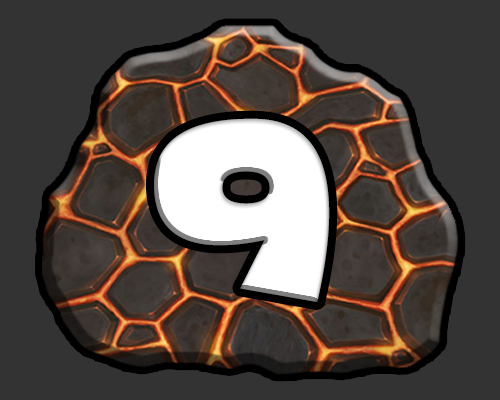
<style>
.page{position:relative;width:500px;height:400px;background:#333333}
.page>*{position:absolute;margin:0}
.t1{font:274.5px "Funhouse";color:#ffffff}
</style>
<div class="page">
<p class="t1" style="left:154px;top:118px;width:176px;height:184px">9</p>
</div>
